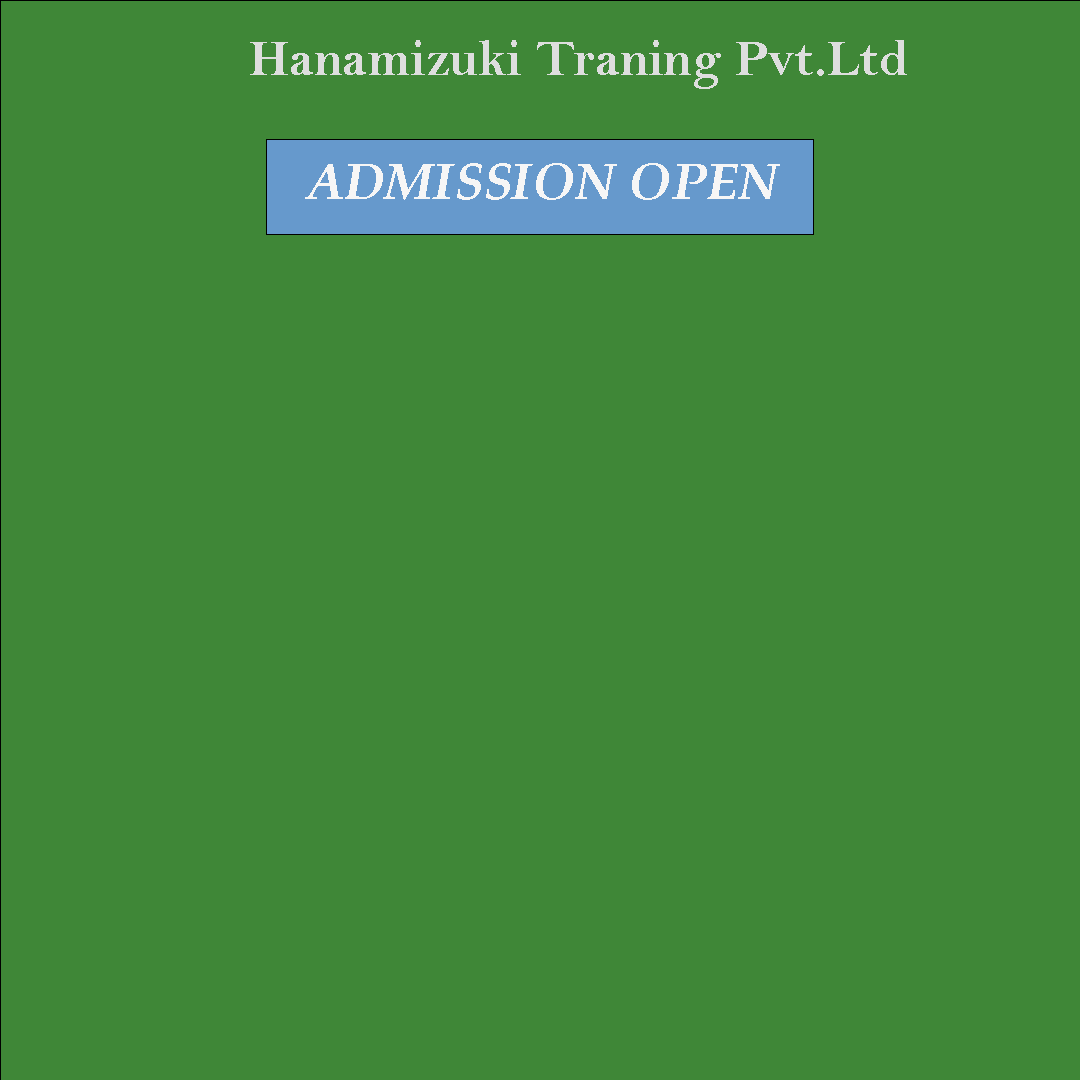
<style>
.page{position:relative;width:1080px;height:1080px;background:#3f8737}
.page>*{position:absolute;margin:0}
.t1{font:52px "BellMTBold";color:#dedede}
.t2{font:52px "BookAntiqua-BoldItalic";color:#f6f6f6}
</style>
<div class="page">
<p class="t1" style="left:250px;top:40px;width:657px;height:49px">Hanamizuki Traning Pvt.Ltd</p>
<p class="t2" style="left:305px;top:163px;width:475px;height:37px">ADMISSION OPEN</p>
</div>
